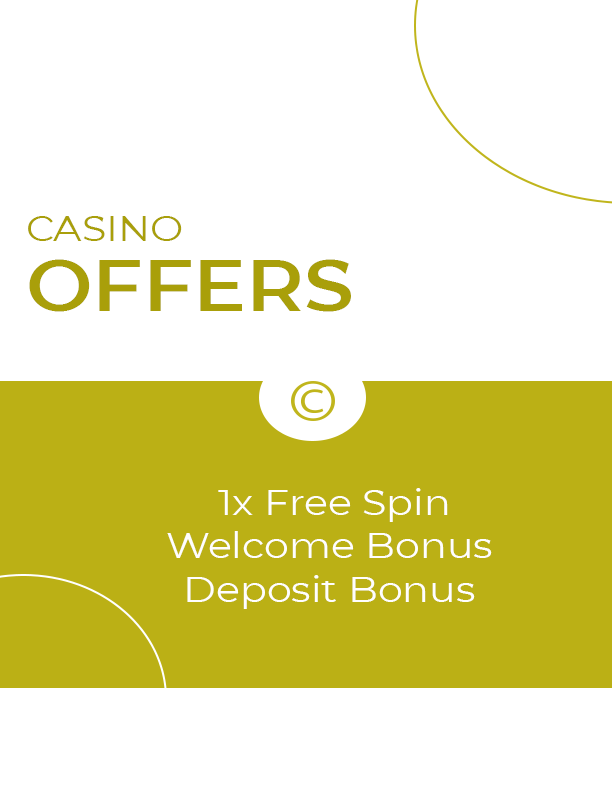
<style>
.page{position:relative;width:612px;height:792px;background:#ffffff}
.page>*{position:absolute;margin:0}
.t1{font:36px/70px "Montserrat-Regular";color:#a99f0a;scale:1.1 1}
.t2{font:72px/70px "Montserrat-SemiBold";color:#a99f0a;scale:1.1 1}
.t3{font:36px "Montserrat-Regular";color:#fffefe;scale:1.1 1}
</style>
<div class="page">
<p class="t1" style="left:28px;top:216px;width:323px;height:96px">CASINO<br><span class="t2">OFFERS</span></p>
<p class="t3" style="left:167px;top:488px;width:325px;height:121px;text-align:center">1x Free Spin<br>Welcome Bonus<br>Deposit Bonus</p>
</div>
